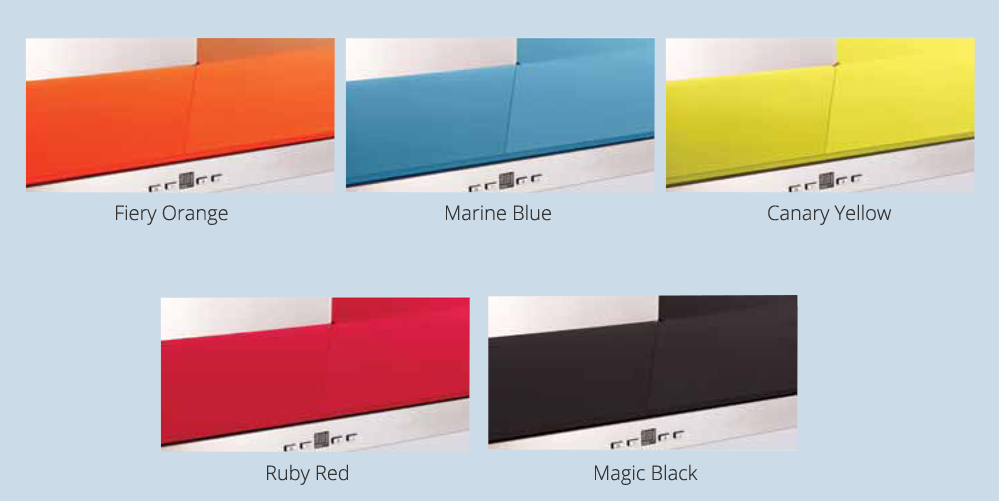
<style>
.page{position:relative;width:999px;height:501px;background:#cbdbe8}
.page>*{position:absolute;margin:0}
.t1{font:20px "OpenSans-Light";color:#333333}
</style>
<div class="page">
<p class="t1" style="left:116px;top:205px;width:112px;height:20px">Fiery Orange</p>
<p class="t1" style="left:446px;top:204px;width:105px;height:17px">Marine Blue</p>
<p class="t1" style="left:768px;top:204px;width:124px;height:21px">Canary Yellow</p>
<p class="t1" style="left:267px;top:464px;width:81px;height:21px">Ruby Red</p>
<p class="t1" style="left:595px;top:464px;width:103px;height:21px">Magic Black</p>
</div>
